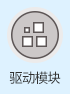
<style>
.page{position:relative;width:70px;height:94px;background:#def2ff}
.page>*{position:absolute;margin:0}
.t1{font:13px "MicrosoftYaHei";color:#323232}
</style>
<div class="page">
<p class="t1" style="left:9px;top:71px;width:52px;height:13px">驱动模块</p>
</div>
